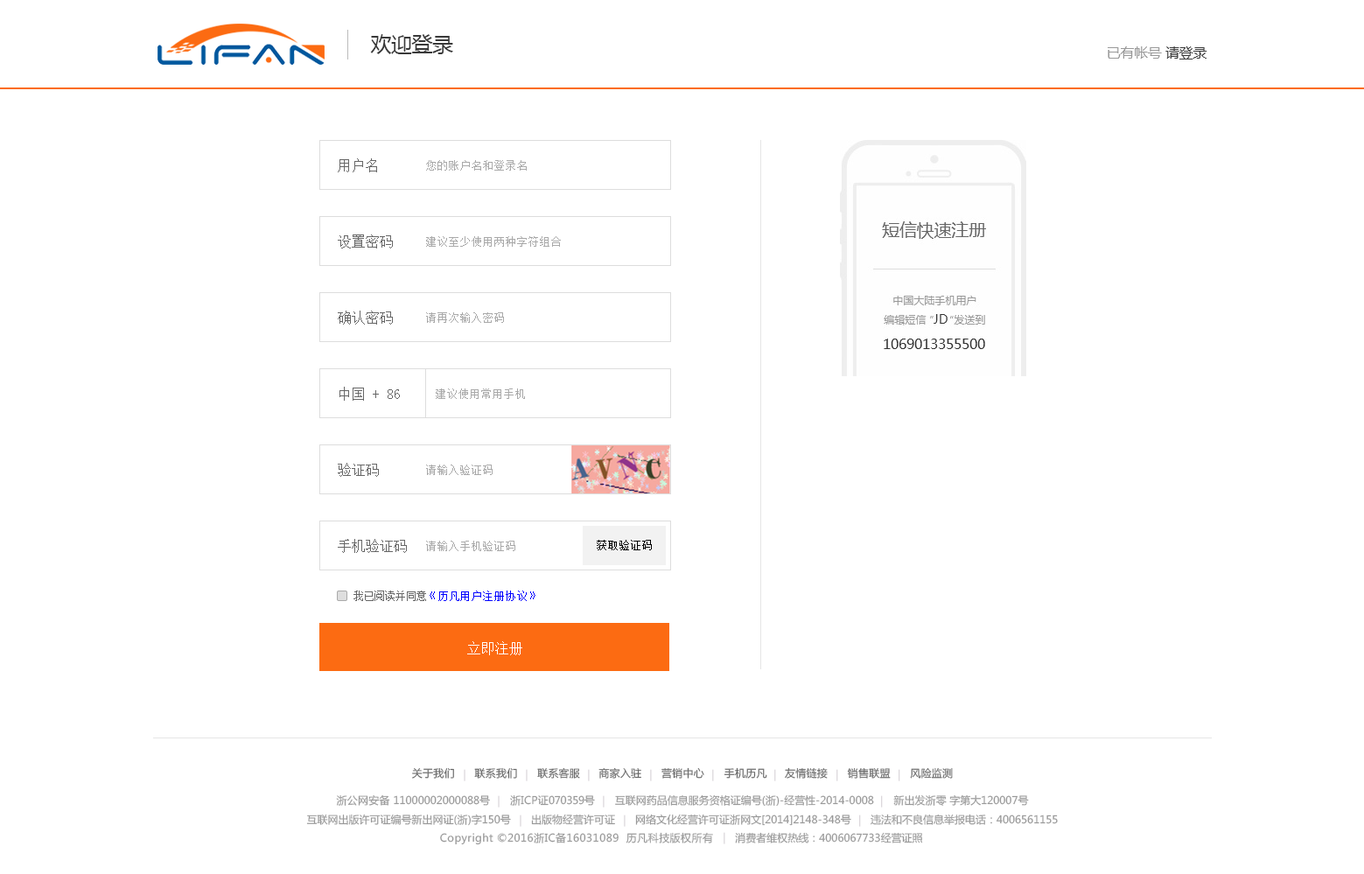
<style>
.page{position:relative;width:1364px;height:874px;background:#ffffff}
.page>*{position:absolute;margin:0}
.t1{font:21px "MicrosoftYaHei";letter-spacing:-0.02em;color:#393939}
.t2{font:14px "MicrosoftYaHei";letter-spacing:-0.02em;color:#999999}
.t3{font:14px "MicrosoftYaHei";letter-spacing:-0.02em;color:#393939}
.t4{font:14px "SimSun";color:#666666}
.t5{font:10.5px "SimSun";letter-spacing:0.08em;color:#a9a9a9}
.t6{font:10.5px "SimSun";letter-spacing:0.08em;color:#000000}
.t7{font:10.5px "SimSun";letter-spacing:0.08em;color:#0000ff}
.t8{font:10.5px "SimSun";color:#666666}
.t9{font:14px "SimSun";color:#ffffff}
.t10{font:10.5px "MicrosoftYaHei";letter-spacing:0.02em;color:#666666}
.t11{font:10.5px "MicrosoftYaHei";color:#999999}
.t12{font:10.5px "MicrosoftYaHei";letter-spacing:0.02em;color:#999999}
.t13{font:10.5px "MicrosoftYaHei";letter-spacing:-0.02em;color:#999999}
.t14{font:10.5px "MicrosoftYaHei";letter-spacing:0.04em;color:#999999}
</style>
<div class="page">
<p class="t1" style="left:370px;top:34px;width:83px;height:20px">欢迎登录</p>
<p class="t2" style="left:1108px;top:46px;width:100px;height:14px">已有帐号<span class="t3"> 请登录</span></p>
<p class="t4" style="left:338px;top:158px;width:39px;height:14px">用户名</p>
<p class="t5" style="left:426px;top:160px;width:101px;height:11px">您的账户名和登录名</p>
<p class="t4" style="left:338px;top:235px;width:55px;height:14px">设置密码</p>
<p class="t5" style="left:426px;top:236px;width:135px;height:11px">建议至少使用两种字符组合</p>
<p class="t4" style="left:338px;top:311px;width:55px;height:14px">确认密码</p>
<p class="t5" style="left:426px;top:312px;width:78px;height:11px">请再次输入密码</p>
<p class="t4" style="left:340px;top:387px;width:60px;height:14px">中国 + 86</p>
<p class="t5" style="left:436px;top:389px;width:89px;height:10px">建议使用常用手机</p>
<p class="t4" style="left:338px;top:463px;width:41px;height:14px">验证码</p>
<p class="t5" style="left:426px;top:465px;width:67px;height:10px">请输入验证码</p>
<p class="t4" style="left:338px;top:539px;width:69px;height:14px">手机验证码</p>
<p class="t5" style="left:426px;top:541px;width:89px;height:10px">请输入手机验证码</p>
<p class="t6" style="left:597px;top:540px;width:55px;height:10px">获取验证码</p>
<p class="t7" style="left:354px;top:591px;width:182px;height:10px"><span class="t8">我已阅读并同意</span>《历凡用户注册协议》</p>
<p class="t9" style="left:467px;top:641px;width:55px;height:14px">立即注册</p>
<p class="t10" style="left:412px;top:767px;width:541px;height:12px">关于我们      联系我们      联系客服     商家入驻      营销中心      手机历凡     友情链接      销售联盟      风险监测</p>
<p class="t11" style="left:336px;top:795px;width:693px;height:12px"><span class="t12">浙公网安备 </span>11000002000088<span class="t12">号      浙ICP证</span><span class="t13">070359号     </span>互联网药品信息服务资格证编号(<span class="t12">浙</span>)-经营性-2014-0008      新出发<span class="t12">浙</span>零 字第大120007号</p>
<p class="t11" style="left:306px;top:814px;width:752px;height:12px">互联网出版许可证编号新出网证(<span class="t12">浙</span>)字150号       出版物经营许可证       网络文化经营许可证<span class="t12">浙</span>网文[2014]2148-348号       违法和不良信息举报电话：4006561155</p>
<p class="t14" style="left:440px;top:832px;width:483px;height:13px"><span class="t11"><br><br></span>Copyright ©2016浙IC备16031089  历凡科技版权所有<span class="t11">       消费者维权热线：4006067733经营证照</span></p>
</div>
